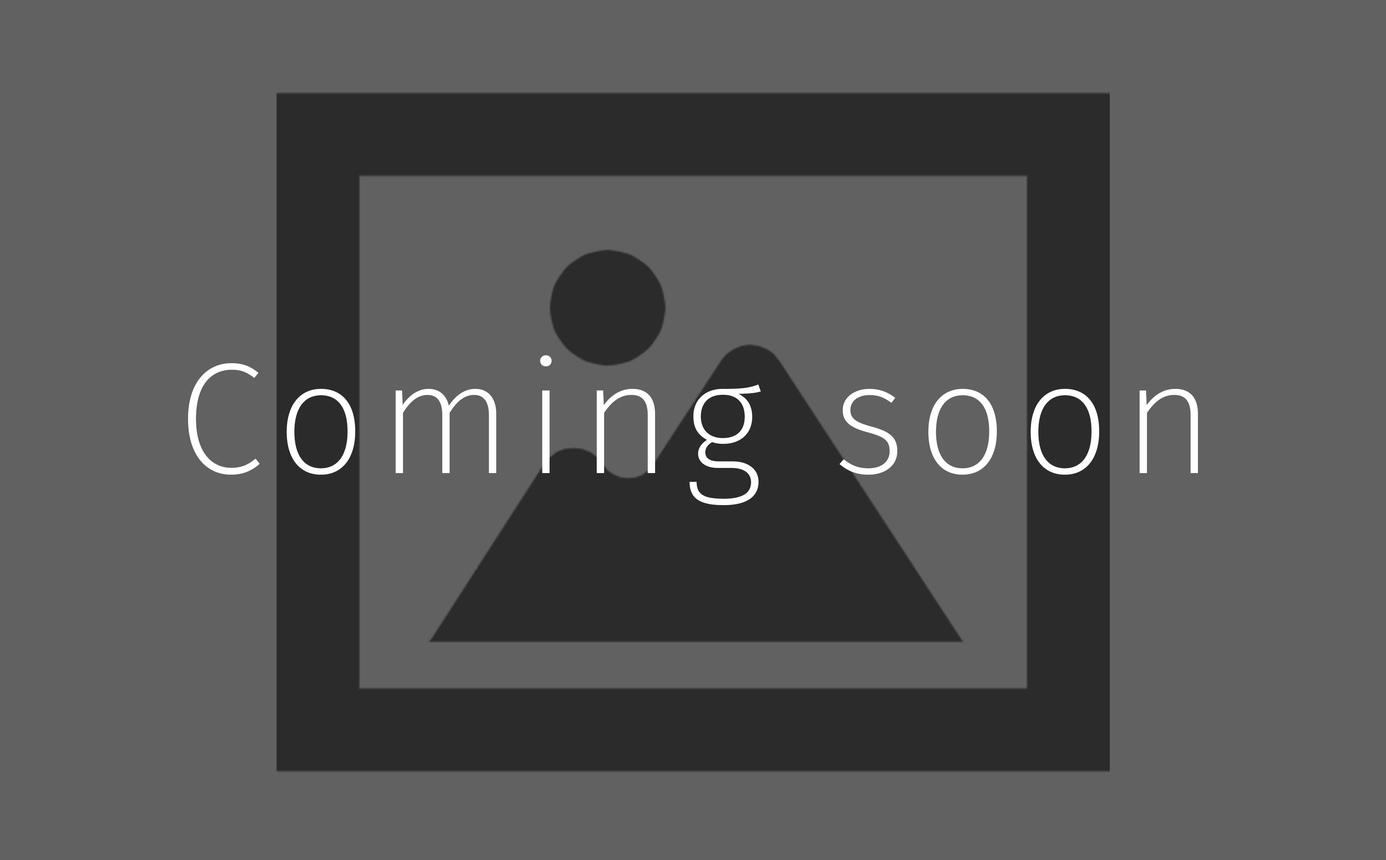
<style>
.page{position:relative;width:1386px;height:860px;background:#616161}
.page>*{position:absolute;margin:0}
.t1{font:158.1px "FiraSans-ExtraLight";letter-spacing:0.08em;color:#ffffff}
</style>
<div class="page">
<p class="t1" style="left:188px;top:355px;width:1010px;height:150px">Coming soon</p>
</div>
